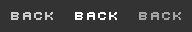
<style>
.page{position:relative;width:192px;height:32px;background:#333333}
.page>*{position:absolute;margin:0}
.t1{font:12.7px "Uni0554";color:#cdcdcd}
.t2{font:12.7px "Uni0554";color:#ffffff}
.t3{font:12.7px "Uni0554";color:#a5a5a5}
</style>
<div class="page">
<p class="t1" style="left:11px;top:12px;width:42px;height:8px">BACK</p>
<p class="t2" style="left:75px;top:12px;width:42px;height:8px">BACK</p>
<p class="t3" style="left:139px;top:12px;width:42px;height:8px">BACK</p>
</div>
